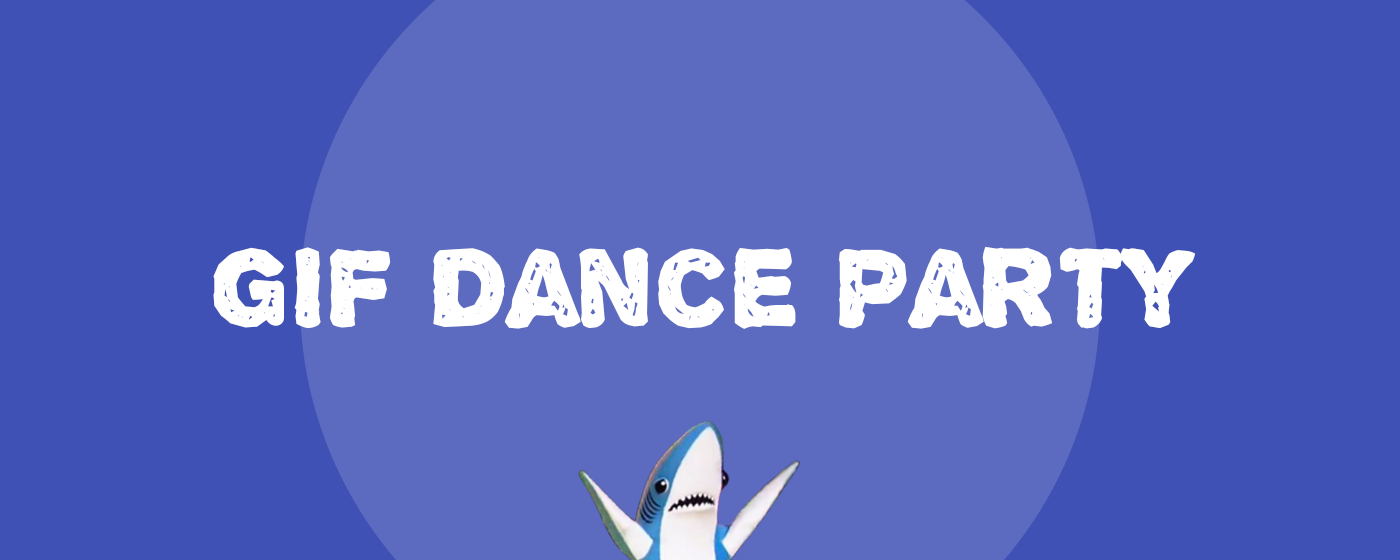
<style>
.page{position:relative;width:1400px;height:560px;background:#3f51b5}
.page>*{position:absolute;margin:0}
.t1{font:120px "AlphaEcho";color:#ffffff}
</style>
<div class="page">
<p class="t1" style="left:213px;top:246px;width:983px;height:83px">GIF Dance Party</p>
</div>
